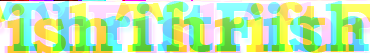
<style>
.page{position:relative;width:370px;height:53px}
.page>*{position:absolute;margin:0}
.t1{font:70px "BookmanOldStyle-Bold"}
</style>
<div class="page">
<p class="t1" style="left:1px;top:1px;width:368px;height:51px">ThriftFish</p>
</div>
